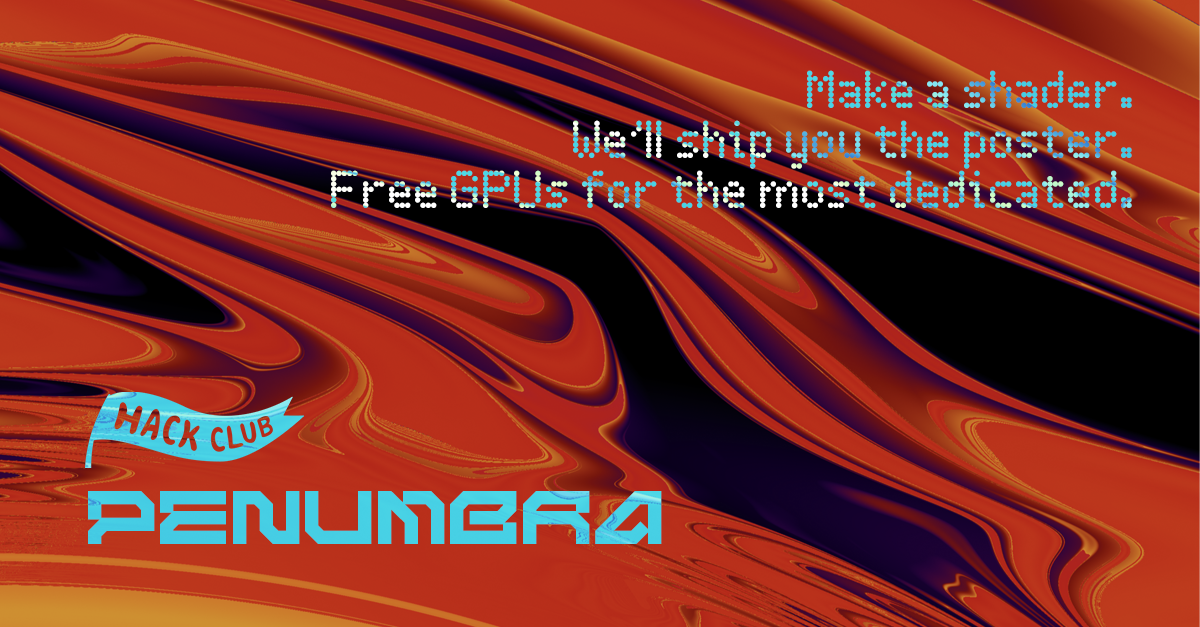
<style>
.page{position:relative;width:1200px;height:627px}
.page>*{position:absolute;margin:0}
.t1{font:24px/50px "NothingFont5x7";letter-spacing:-0.02em}
.t2{font:65.9px "KleemaxDEMO";color:#46cfe4}
</style>
<div class="page">
<p class="t1" style="left:331px;top:70px;width:801px;height:138px;text-align:right">Make a shader.<br>We’ll ship you the poster.<br>Free GPUs for the most dedicated.</p>
<p class="t2" style="left:88px;top:491px;width:574px;height:53px">PENUMBRA</p>
</div>
